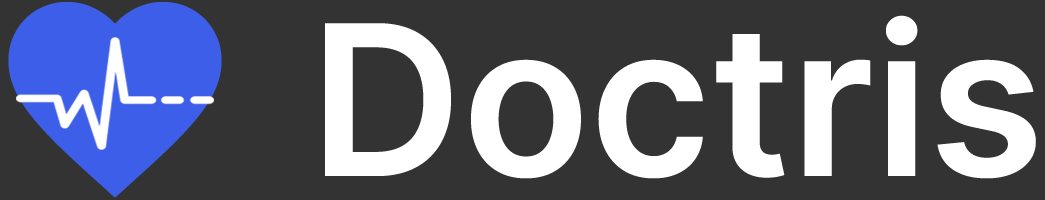
<style>
.page{position:relative;width:1045px;height:200px;background:#333333}
.page>*{position:absolute;margin:0}
.t1{font:210px "Inter-SemiBold";color:#ffffff}
</style>
<div class="page">
<p class="t1" style="left:325px;top:15px;width:711px;height:164px">Doctris</p>
</div>
